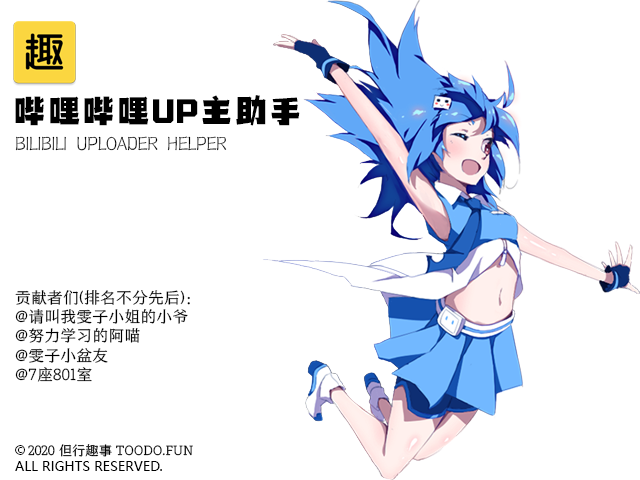
<style>
.page{position:relative;width:640px;height:480px;background:#ffffff}
.page>*{position:absolute;margin:0}
.t1{font:34.7px "FZQUHJW--GB1-0";color:#000000;text-transform:uppercase}
.t2{font:18.7px "FZSHENGSKS_JW--GB1-0";color:#000000;text-transform:uppercase}
.t3{font:16px "FZYOUSS_508R--GB1-0";color:#000000;text-transform:uppercase}
.t4{font:13.3px "MicrosoftYaHei";color:#000000;text-transform:uppercase}
.t5{font:13.3px "AdobeHeitiStd-Regular";color:#000000;text-transform:uppercase}
.t6{font:13.3px "FZYOUSS_508R--GB1-0";color:#000000;text-transform:uppercase}
</style>
<div class="page">
<p class="t1" style="left:15px;top:95px;width:285px;height:31px">哔哩哔哩UP主助手</p>
<p class="t2" style="left:15px;top:136px;width:212px;height:15px">Bilibili Uploader helper</p>
<p class="t3" style="left:15px;top:290px;width:175px;height:92px">贡献者们(排名不分先后)：<br>@请叫我雯子小姐的小爷<br>@努力学习的阿喵<br>@雯子小盆友<br>@7座801室</p>
<p class="t4" style="left:15px;top:444px;width:178px;height:27px"><span class="t5">© </span><span class="t6">2020 但行趣事 toodo.fun<br></span>All rights reserved.</p>
</div>
